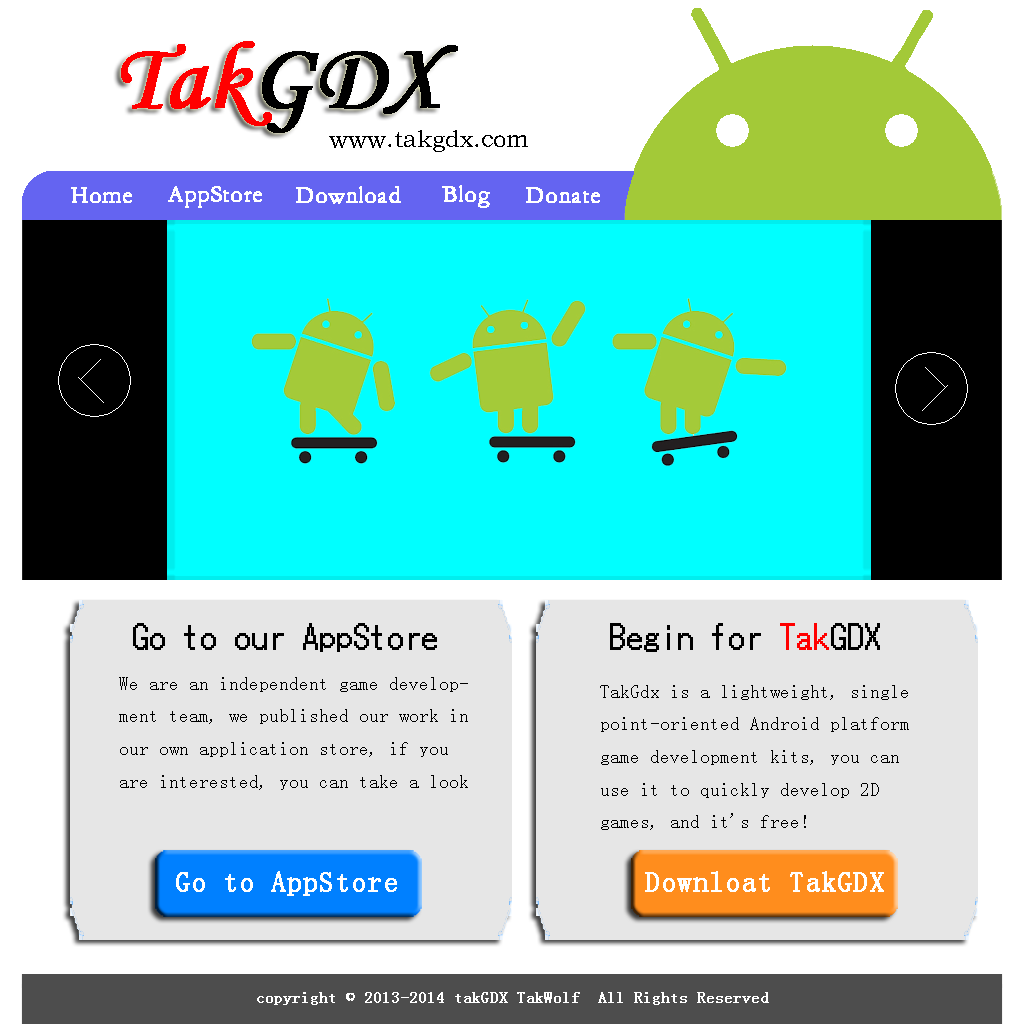
<style>
.page{position:relative;width:1024px;height:1024px;background:#e6e6e6}
.page>*{position:absolute;margin:0}
.t1{font:96px "STLiti";color:#ff0000;font-weight:bold}
.t2{font:96px "STLiti";color:#000000;font-weight:bold}
.t3{font:24px "STZhongsong";color:#000000}
.t4{font:24px "STSong";color:#ffffff;font-weight:bold}
.t5{font:40px "Terminal";color:#000000;font-weight:bold}
.t6{font:40px "Terminal";color:#ff0000;font-weight:bold}
.t7{font:18.7px "SimSun";color:#000000}
.t8{font:29.3px "SimSun";color:#ffffff;font-weight:bold}
.t9{font:16px "SimSun";color:#ffffff;font-weight:bold}
</style>
<div class="page">
<p class="t1" style="left:121px;top:41px;width:337px;height:92px">Tak<span class="t2">GDX</span></p>
<p class="t3" style="left:329px;top:130px;width:199px;height:22px">www.takgdx.com</p>
<p class="t4" style="left:442px;top:185px;width:48px;height:23px">Blog</p>
<p class="t4" style="left:71px;top:187px;width:61px;height:16px">Home</p>
<p class="t4" style="left:168px;top:186px;width:94px;height:22px">AppStore</p>
<p class="t4" style="left:296px;top:186px;width:105px;height:18px">Download</p>
<p class="t4" style="left:526px;top:187px;width:74px;height:16px">Donate</p>
<p class="t5" style="left:133px;top:623px;width:304px;height:29px">Go to our AppStore</p>
<p class="t5" style="left:610px;top:623px;width:270px;height:29px">Begin for <span class="t6">Tak</span>GDX</p>
<p class="t7" style="left:119px;top:677px;width:349px;height:113px">We are an independent game development team, we published our work in our own application store, if you are interested, you can take a look</p>
<p class="t7" style="left:600px;top:685px;width:309px;height:145px">TakGdx is a lightweight, single point-oriented Android platform game development kits, you can use it to quickly develop 2D games, and it's free!</p>
<p class="t8" style="left:176px;top:871px;width:221px;height:25px">Go to AppStore</p>
<p class="t8" style="left:645px;top:871px;width:239px;height:21px">Downloat TakGDX</p>
<p class="t9" style="left:257px;top:992px;width:512px;height:13px">copyright © 2013-2014 takGDX TakWolf  All Rights Reserved</p>
</div>
